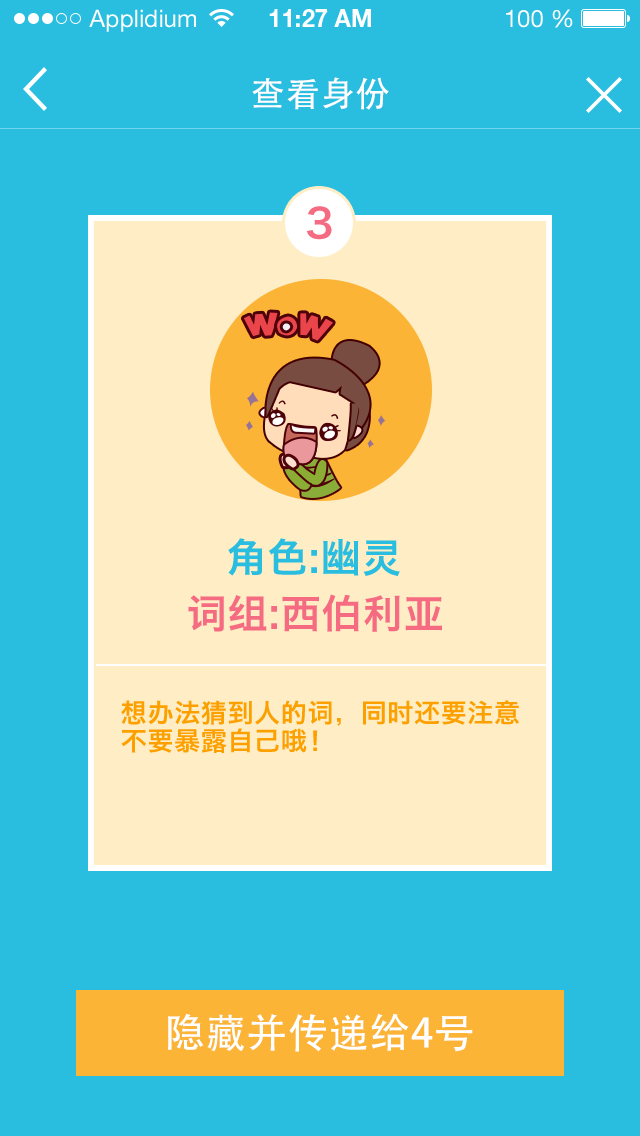
<style>
.page{position:relative;width:640px;height:1136px;background:#29bde0}
.page>*{position:absolute;margin:0}
.t1{font:34px "AdobeHeitiStd-Regular";letter-spacing:0.025em;color:#ffffff}
.t2{font:40px "HiraginoSansGB-W6";letter-spacing:0.025em;color:#f56b81}
.t3{font:40px "HiraginoSansGB-W6";letter-spacing:0.025em;color:#29bde0}
.t4{font:26px/28px "HiraginoSansGB-W6";letter-spacing:0.025em;color:#fca000}
.t5{font:40px "AdobeHeitiStd-Regular";letter-spacing:0.025em;color:#ffffff}
</style>
<div class="page">
<p class="t1" style="left:252px;top:77px;width:137px;height:33px">查看身份</p>
<p class="t2" style="left:306px;top:206px;width:26px;height:34px">3</p>
<p class="t3" style="left:228px;top:538px;width:172px;height:38px">角色:幽灵</p>
<p class="t2" style="left:188px;top:594px;width:254px;height:38px">词组:西伯利亚</p>
<p class="t4" style="left:121px;top:700px;width:398px;height:53px">想办法猜到人的词，同时还要注意<br>不要暴露自己哦！</p>
<p class="t5" style="left:168px;top:1013px;width:305px;height:39px">隐藏并传递给4号</p>
</div>
